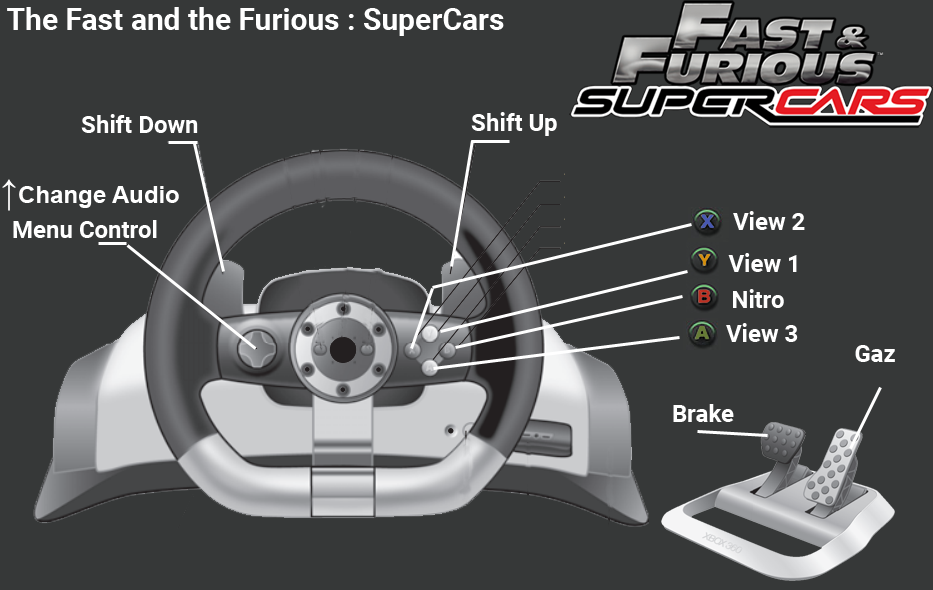
<style>
.page{position:relative;width:933px;height:590px;background:#363838}
.page>*{position:absolute;margin:0}
.t1{font:30px "Roboto-Bold";color:#ffffff}
.t2{font:24px "Roboto-Bold";color:#ffffff}
.t3{font:24px "Arial-BoldMT";color:#ffffff}
.t4{font:36px "Arial-BoldMT";color:#ffffff}
</style>
<div class="page">
<p class="t1" style="left:7px;top:7px;width:497px;height:29px">The Fast and the Furious : SuperCars</p>
<p class="t2" style="left:471px;top:112px;width:86px;height:24px">Shift Up</p>
<p class="t2" style="left:81px;top:114px;width:117px;height:19px">Shift Down</p>
<p class="t3" style="left:2px;top:179px;width:177px;height:32px"><span class="t4">↑</span>Change Audio</p>
<p class="t2" style="left:13px;top:220px;width:144px;height:18px">Menu Control</p>
<p class="t2" style="left:733px;top:211px;width:72px;height:19px">View 2</p>
<p class="t2" style="left:728px;top:253px;width:69px;height:19px">View 1</p>
<p class="t2" style="left:733px;top:289px;width:51px;height:19px">Nitro</p>
<p class="t2" style="left:726px;top:323px;width:72px;height:19px">View 3</p>
<p class="t2" style="left:855px;top:345px;width:40px;height:17px">Gaz</p>
<p class="t2" style="left:673px;top:404px;width:61px;height:18px">Brake</p>
</div>
